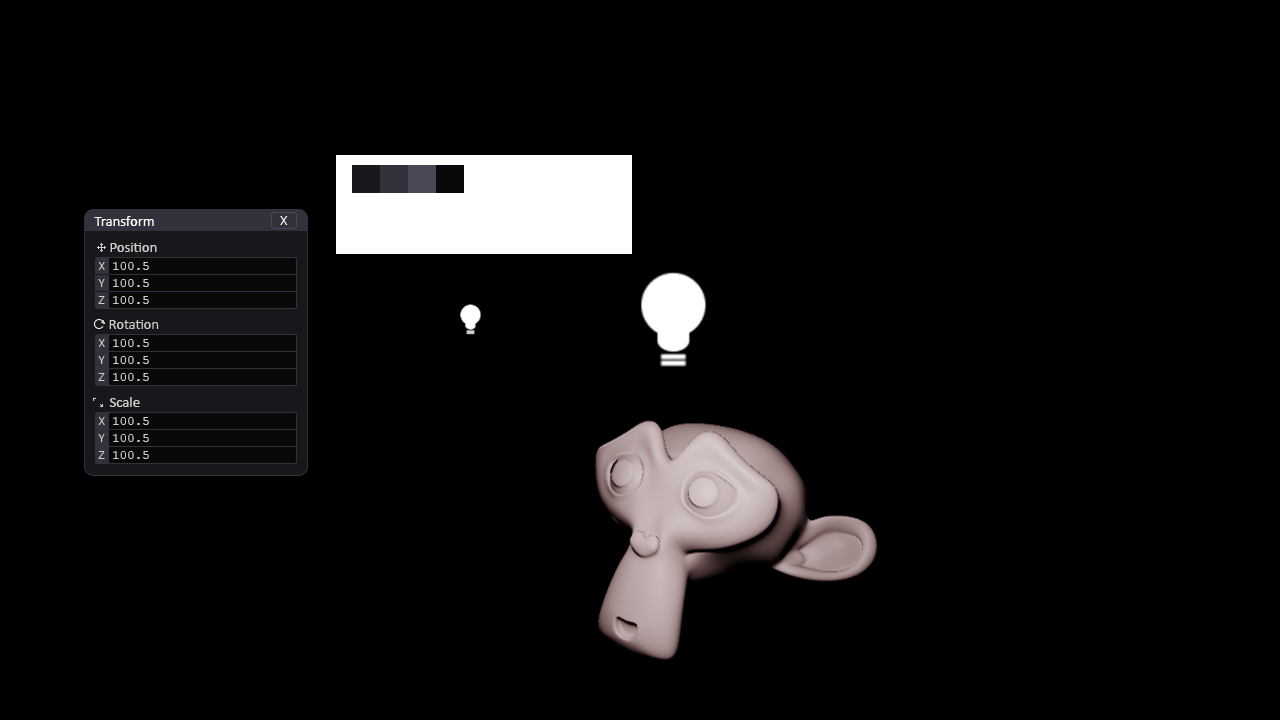
<style>
.page{position:relative;width:1280px;height:720px;background:#000000}
.page>*{position:absolute;margin:0}
.t1{font:14.6px "Calibri";color:#ffffff}
.t2{font:14.6px "Calibri-Light";color:#ffffff}
.t3{font:14.6px "Calibri";color:#cfcfcf}
.t4{font:12.5px "Calibri-Light";color:#cfcfcf}
.t5{font:12.5px "CourierNewPSMT";color:#cfcfcf}
</style>
<div class="page">
<p class="t1" style="left:94px;top:216px;width:60px;height:10px">Transform</p>
<p class="t2" style="left:280px;top:216px;width:8px;height:9px">X</p>
<p class="t3" style="left:110px;top:243px;width:47px;height:9px">Position</p>
<p class="t4" style="left:98px;top:262px;width:7px;height:8px">X</p>
<p class="t5" style="left:113px;top:262px;width:36px;height:8px">100.5</p>
<p class="t4" style="left:98px;top:279px;width:7px;height:8px">Y</p>
<p class="t5" style="left:113px;top:279px;width:36px;height:8px">100.5</p>
<p class="t4" style="left:98px;top:296px;width:7px;height:8px">Z</p>
<p class="t5" style="left:113px;top:296px;width:36px;height:8px">100.5</p>
<p class="t4" style="left:98px;top:339px;width:7px;height:8px">X</p>
<p class="t5" style="left:113px;top:339px;width:36px;height:8px">100.5</p>
<p class="t4" style="left:98px;top:356px;width:7px;height:8px">Y</p>
<p class="t5" style="left:113px;top:356px;width:36px;height:8px">100.5</p>
<p class="t4" style="left:98px;top:373px;width:7px;height:8px">Z</p>
<p class="t5" style="left:113px;top:373px;width:36px;height:8px">100.5</p>
<p class="t3" style="left:109px;top:397px;width:31px;height:10px">Scale</p>
<p class="t4" style="left:98px;top:417px;width:7px;height:8px">X</p>
<p class="t5" style="left:113px;top:417px;width:36px;height:8px">100.5</p>
<p class="t4" style="left:98px;top:434px;width:7px;height:8px">Y</p>
<p class="t5" style="left:113px;top:434px;width:36px;height:8px">100.5</p>
<p class="t4" style="left:98px;top:451px;width:7px;height:8px">Z</p>
<p class="t5" style="left:113px;top:451px;width:36px;height:8px">100.5</p>
</div>
